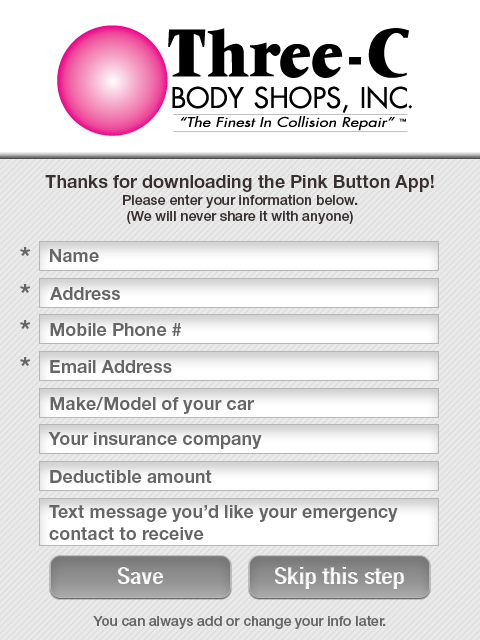
<style>
.page{position:relative;width:480px;height:640px;background:#ffffff}
.page>*{position:absolute;margin:0}
.t1{font:14px "HelveticaNeueLTStd-Md";color:#393030}
.t2{font:18px "HelveticaNeueLTStd-Bd";color:#393030}
.t3{font:28px "HelveticaNeueLTStd-Bd";color:#666666}
.t4{font:18px "HelveticaNeueLTStd-Bd";color:#666666}
.t5{font:24px "HelveticaNeueLTStd-BdCn"}
.t6{font:24px "HelveticaNeueLTStd-BdCn";color:#f3f3f3}
.t7{font:14px "HelveticaNeueLTStd-Md";color:#666666}
</style>
<div class="page">
<p class="t1" style="left:45px;top:175px;width:389px;height:49px;text-align:center"><span class="t2">Thanks for downloading the Pink Button App!<br></span>Please enter your information below.<br>(We will never share it with anyone)</p>
<p class="t3" style="left:20px;top:247px;width:11px;height:10px">*</p>
<p class="t4" style="left:50px;top:249px;width:49px;height:13px">Name</p>
<p class="t3" style="left:20px;top:284px;width:11px;height:10px">*</p>
<p class="t4" style="left:50px;top:287px;width:70px;height:13px">Address</p>
<p class="t3" style="left:20px;top:320px;width:11px;height:10px">*</p>
<p class="t4" style="left:50px;top:323px;width:131px;height:13px">Mobile Phone #</p>
<p class="t3" style="left:20px;top:357px;width:11px;height:10px">*</p>
<p class="t4" style="left:50px;top:360px;width:122px;height:13px">Email Address</p>
<p class="t4" style="left:50px;top:397px;width:204px;height:17px">Make/Model of your car</p>
<p class="t4" style="left:48px;top:432px;width:214px;height:17px">Your insurance company</p>
<p class="t4" style="left:50px;top:470px;width:162px;height:13px">Deductible amount</p>
<p class="t4" style="left:49px;top:505px;width:349px;height:35px">Text message you’d like your emergency<br>contact to receive</p>
<p class="t5" style="left:118px;top:566px;width:45px;height:18px">Save</p>
<p class="t6" style="left:275px;top:566px;width:129px;height:23px">Skip this step</p>
<p class="t7" style="left:93px;top:615px;width:293px;height:14px">You can always add or change your info later.</p>
</div>
